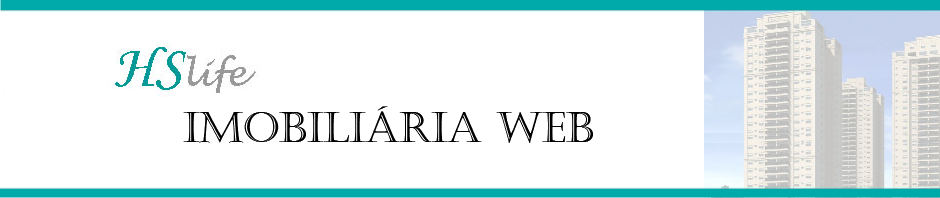
<style>
.page{position:relative;width:940px;height:198px;background:#ffffff}
.page>*{position:absolute;margin:0}
.t1{font:41.7px "Castellar";color:#000000}
</style>
<div class="page">
<p class="t1" style="left:183px;top:106px;width:410px;height:37px">IMOBILIÁRIA WEB</p>
</div>
